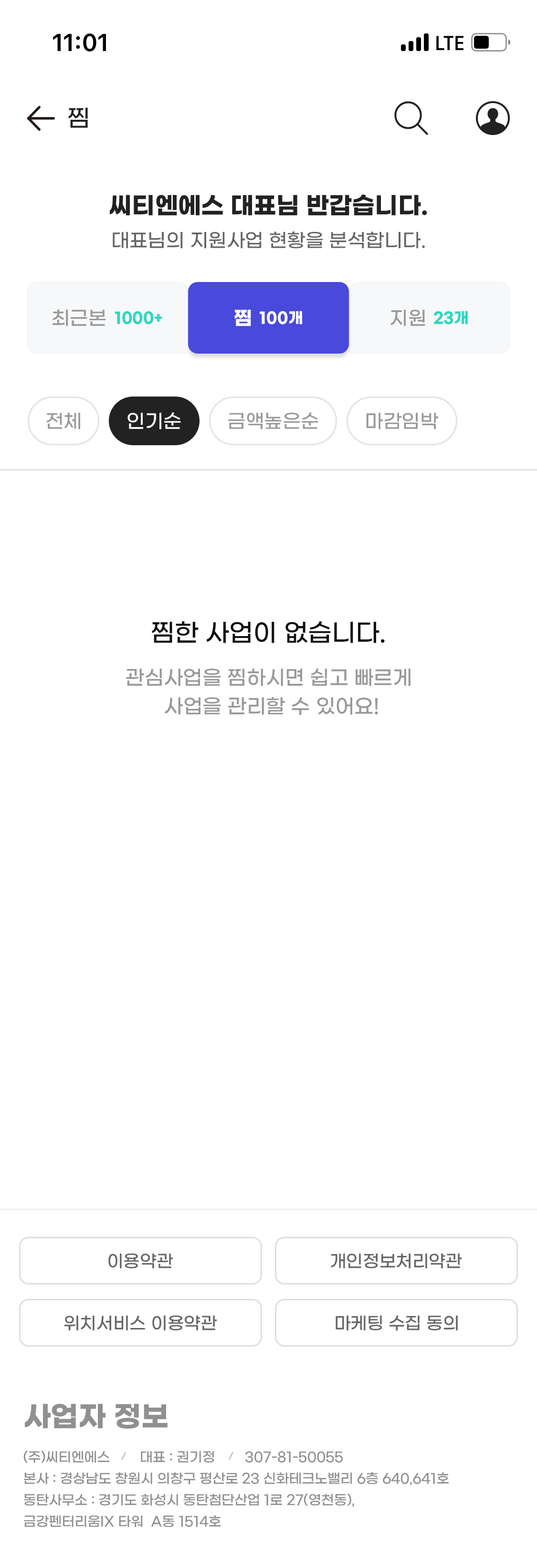
<style>
.page{position:relative;width:537px;height:1568px;background:#ffffff}
.page>*{position:absolute;margin:0}
.t1{font:23.9px "GmarketSansMedium";color:#222222}
.t2{font:23.9px "GmarketSansBold";color:#222222}
.t3{font:19.1px "GmarketSansMedium";color:#666666}
.t4{font:19.1px "GmarketSansMedium";color:#999999}
.t5{font:15.3px "GmarketSansBold";color:#30d6c2}
.t6{font:19.1px "GmarketSansBold";letter-spacing:0.01em;color:#ffffff}
.t7{font:15.3px "GmarketSansBold";letter-spacing:0.01em;color:#ffffff}
.t8{font:19.1px "GmarketSansMedium";color:#ffffff}
.t9{font:24.8px "GmarketSansMedium";color:#101010}
.t10{font:20px/28.6px "GmarketSansMedium";color:#999999}
.t11{font:17.2px "GmarketSansMedium";color:#666666}
.t12{font:28.6px "GmarketSansBold";color:#909090}
.t13{font:13.4px/21.5px "GmarketSansMedium";color:#909090}
</style>
<div class="page">
<p class="t1" style="left:68px;top:107px;width:20px;height:21px">찜</p>
<p class="t2" style="left:110px;top:194px;width:317px;height:22px">씨티엔에스 대표님 반갑습니다.</p>
<p class="t3" style="left:113px;top:231px;width:312px;height:18px">대표님의 지원사업 현황을 분석합니다.</p>
<p class="t4" style="left:52px;top:309px;width:54px;height:17px">최근본</p>
<p class="t5" style="left:115px;top:311px;width:47px;height:13px">1000+</p>
<p class="t6" style="left:234px;top:310px;width:17px;height:16px">찜</p>
<p class="t7" style="left:260px;top:311px;width:42px;height:13px">100개</p>
<p class="t4" style="left:391px;top:310px;width:34px;height:16px">지원</p>
<p class="t5" style="left:434px;top:311px;width:34px;height:13px">23개</p>
<p class="t4" style="left:47px;top:413px;width:33px;height:16px">전체</p>
<p class="t8" style="left:127px;top:412px;width:54px;height:17px">인기순</p>
<p class="t4" style="left:228px;top:412px;width:90px;height:17px">금액높은순</p>
<p class="t4" style="left:366px;top:413px;width:72px;height:16px">마감임박</p>
<p class="t9" style="left:152px;top:621px;width:233px;height:22px">찜한 사업이 없습니다.</p>
<p class="t10" style="left:126px;top:669px;width:284px;height:46px;text-align:center">관심사업을 찜하시면 쉽고 빠르게 <br>사업을 관리할 수 있어요!</p>
<p class="t11" style="left:108px;top:1253px;width:65px;height:15px">이용약관</p>
<p class="t11" style="left:331px;top:1253px;width:131px;height:15px">개인정보처리약관</p>
<p class="t11" style="left:64px;top:1315px;width:153px;height:15px">위치서비스 이용약관</p>
<p class="t11" style="left:335px;top:1315px;width:123px;height:16px">마케팅 수집 동의</p>
<p class="t12" style="left:25px;top:1404px;width:142px;height:25px">사업자 정보</p>
<p class="t13" style="left:23px;top:1451px;width:426px;height:76px">(주)씨티엔에스        대표 : 권기정        307-81-50055<br>본사 : 경상남도 창원시 의창구 평산로 23 신화테크노밸리 6층 640,641호<br>동탄사무소 : 경기도 화성시 동탄첨단산업 1로 27(영천동),<br>금강펜터리움IX 타워  A동 1514호</p>
</div>
